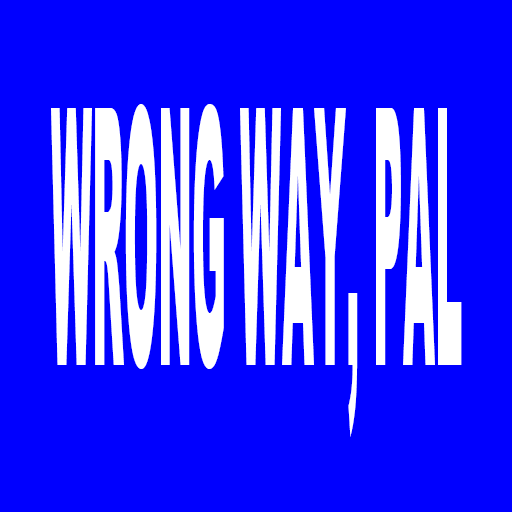
<style>
.page{position:relative;width:512px;height:512px;background:#0000ff}
.page>*{position:absolute;margin:0}
.t1{font:358.9px "Arial-Black";color:#ffffff;scale:0.11 1}
</style>
<div class="page">
<p class="t1" style="left:51px;top:104px;width:411px;height:333px">WRONG WAY, PAL</p>
</div>
